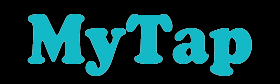
<style>
.page{position:relative;width:280px;height:84px;background:#000000}
.page>*{position:absolute;margin:0}
.t1{font:72px "CooperBlack";color:#14b9c8;scale:0.92 1}
</style>
<div class="page">
<p class="t1" style="left:27px;top:14px;width:225px;height:62px">MyTap</p>
<p class="t1" style="left:27px;top:14px;width:225px;height:62px">MyTap</p>
</div>
